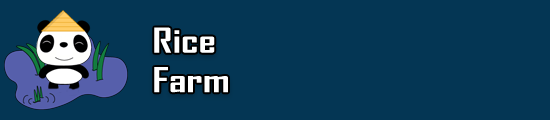
<style>
.page{position:relative;width:550px;height:120px;background:#043654}
.page>*{position:absolute;margin:0}
.t1{font:32.9px "AgencyFB-Bold";color:#ffffff;scale:1.33 1}
</style>
<div class="page">
<p class="t1" style="left:154px;top:27px;width:74px;height:66px">Rice <br>Farm</p>
</div>
